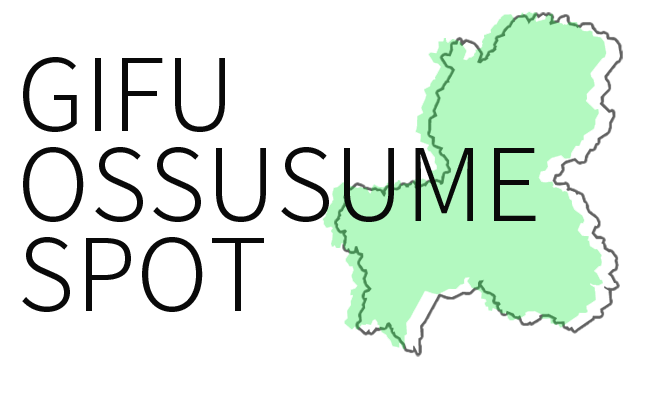
<style>
.page{position:relative;width:652px;height:393px;background:#ffffff}
.page>*{position:absolute;margin:0}
.t1{font:100px/90px "NotoSansJP-Light";color:#090909}
.t2{font:100px/80px "NotoSansJP-Light";color:#090909}
</style>
<div class="page">
<p class="t1" style="left:22px;top:57px;width:514px;height:255px">GIFU<br>OSSUSUME<br><span class="t2">SPOT</span></p>
</div>
